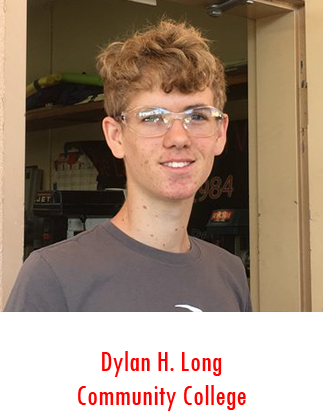
<style>
.page{position:relative;width:323px;height:420px;background:#ffffff}
.page>*{position:absolute;margin:0}
.t1{font:30px "TwCenMT-Condensed";color:#ff0000}
</style>
<div class="page">
<p class="t1" style="left:102px;top:351px;width:120px;height:26px">Dylan H. Long</p>
<p class="t1" style="left:78px;top:385px;width:168px;height:26px">Community College</p>
</div>
